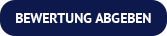
<style>
.page{position:relative;width:167px;height:36px;background:#0d194d}
.page>*{position:absolute;margin:0}
.t1{font:14px "PTSans-Bold";color:#ffffff;text-transform:uppercase}
</style>
<div class="page">
<p class="t1" style="left:16px;top:13px;width:135px;height:10px">Bewertung abgeben</p>
</div>
